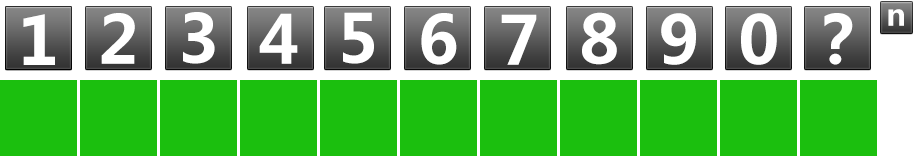
<style>
.page{position:relative;width:914px;height:156px;background:#1bbf0e}
.page>*{position:absolute;margin:0}
.t1{font:66px "MicrosoftYaHei-Bold";color:#ffffff}
.t2{font:30px "MicrosoftYaHei-Bold";color:#ffffff}
</style>
<div class="page">
<p class="t1" style="left:23px;top:14px;width:32px;height:51px">1</p>
<p class="t1" style="left:101px;top:13px;width:34px;height:51px">2</p>
<p class="t1" style="left:183px;top:12px;width:32px;height:52px">3</p>
<p class="t1" style="left:259px;top:13px;width:39px;height:51px">4</p>
<p class="t1" style="left:343px;top:12px;width:31px;height:52px">5</p>
<p class="t1" style="left:421px;top:13px;width:36px;height:52px">6</p>
<p class="t1" style="left:501px;top:14px;width:36px;height:51px">7</p>
<p class="t1" style="left:582px;top:12px;width:35px;height:53px">8</p>
<p class="t1" style="left:661px;top:13px;width:35px;height:52px">9</p>
<p class="t1" style="left:741px;top:13px;width:36px;height:52px">0</p>
<p class="t1" style="left:824px;top:13px;width:29px;height:52px">？</p>
<p class="t2" style="left:888px;top:9px;width:16px;height:17px">n</p>
</div>
